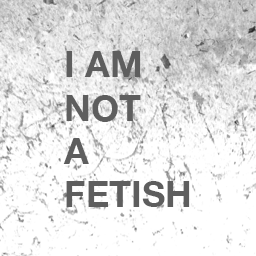
<style>
.page{position:relative;width:256px;height:256px;background:#ffffff}
.page>*{position:absolute;margin:0}
.t1{font:36px "HelveticaNeue-Bold";color:#5e5e5e;text-transform:uppercase}
</style>
<div class="page">
<p class="t1" style="left:63px;top:51px;width:127px;height:156px">i am<br>not<br>a<br>fetish</p>
</div>
